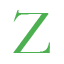
<style>
.page{position:relative;width:64px;height:64px;background:#ffffff}
.page>*{position:absolute;margin:0}
.t1{font:64px "STKaiti";color:#4caf50}
</style>
<div class="page">
<p class="t1" style="left:13px;top:10px;width:37px;height:43px">Z</p>
</div>
